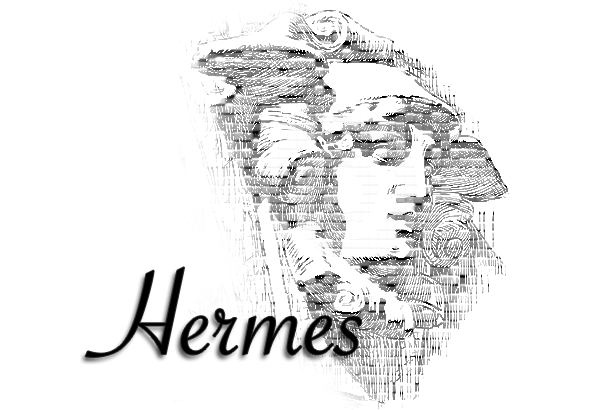
<style>
.page{position:relative;width:600px;height:410px;background:#ffffff}
.page>*{position:absolute;margin:0}
.t1{font:132.2px "SavoyeLetPlain";color:#000000}
</style>
<div class="page">
<p class="t1" style="left:85px;top:267px;width:277px;height:91px">Hermes</p>
</div>
